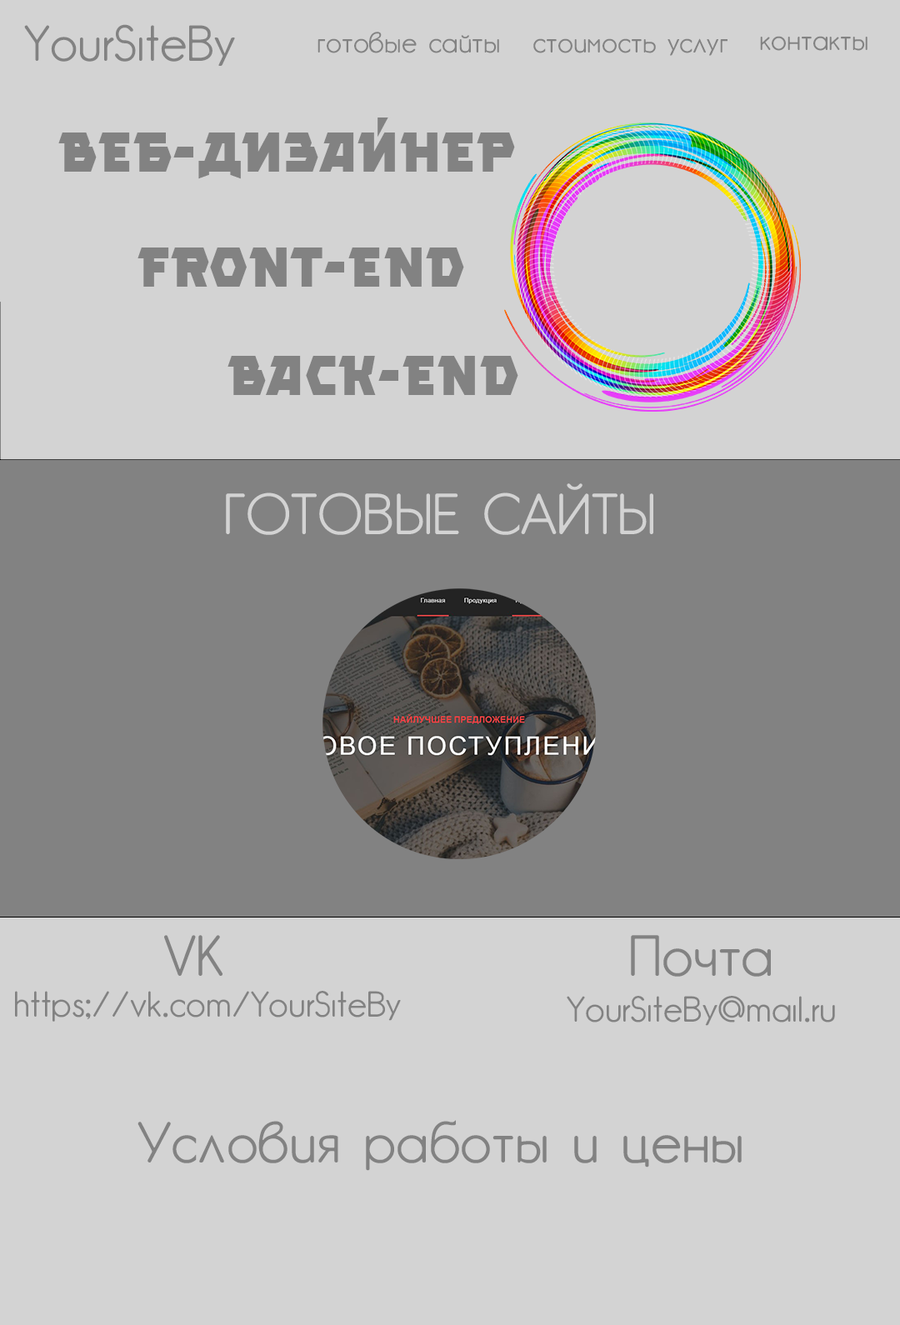
<style>
.page{position:relative;width:900px;height:1325px;background:#d3d3d3}
.page>*{position:absolute;margin:0}
.t1{font:48.6px "CM_GARDEN_R";color:#828282}
.t2{font:27.8px "CM_GARDEN_R";color:#828282}
.t3{font:55.6px "Clickuper";color:#828282}
.t4{font:55.6px "CM_GARDEN_R";color:#d3d3d3}
.t5{font:55.6px "CM_GARDEN_R";color:#828282}
.t6{font:34.7px "CM_GARDEN_R";color:#828282}
</style>
<div class="page">
<p class="t1" style="left:24px;top:24px;width:211px;height:42px">YourSiteBy</p>
<p class="t2" style="left:317px;top:32px;width:182px;height:21px">готовые сайты</p>
<p class="t2" style="left:533px;top:38px;width:194px;height:18px">стоимость услуг</p>
<p class="t2" style="left:760px;top:36px;width:107px;height:15px">контакты</p>
<p class="t3" style="left:58px;top:117px;width:457px;height:62px">веб-дизайнер</p>
<p class="t3" style="left:137px;top:247px;width:327px;height:40px">Front-End</p>
<p class="t3" style="left:227px;top:356px;width:291px;height:39px">BAck-End</p>
<p class="t4" style="left:226px;top:483px;width:427px;height:52px">ГОТОВЫЕ САЙТЫ</p>
<p class="t5" style="left:164px;top:935px;width:59px;height:41px">VK</p>
<p class="t5" style="left:631px;top:935px;width:140px;height:42px">Почта</p>
<p class="t6" style="left:15px;top:991px;width:386px;height:31px">https;//vk.com/YourSiteBy</p>
<p class="t6" style="left:567px;top:996px;width:268px;height:30px">YourSiteBy@mail.ru</p>
<p class="t5" style="left:137px;top:1120px;width:605px;height:51px">Условия работы и цены</p>
</div>
